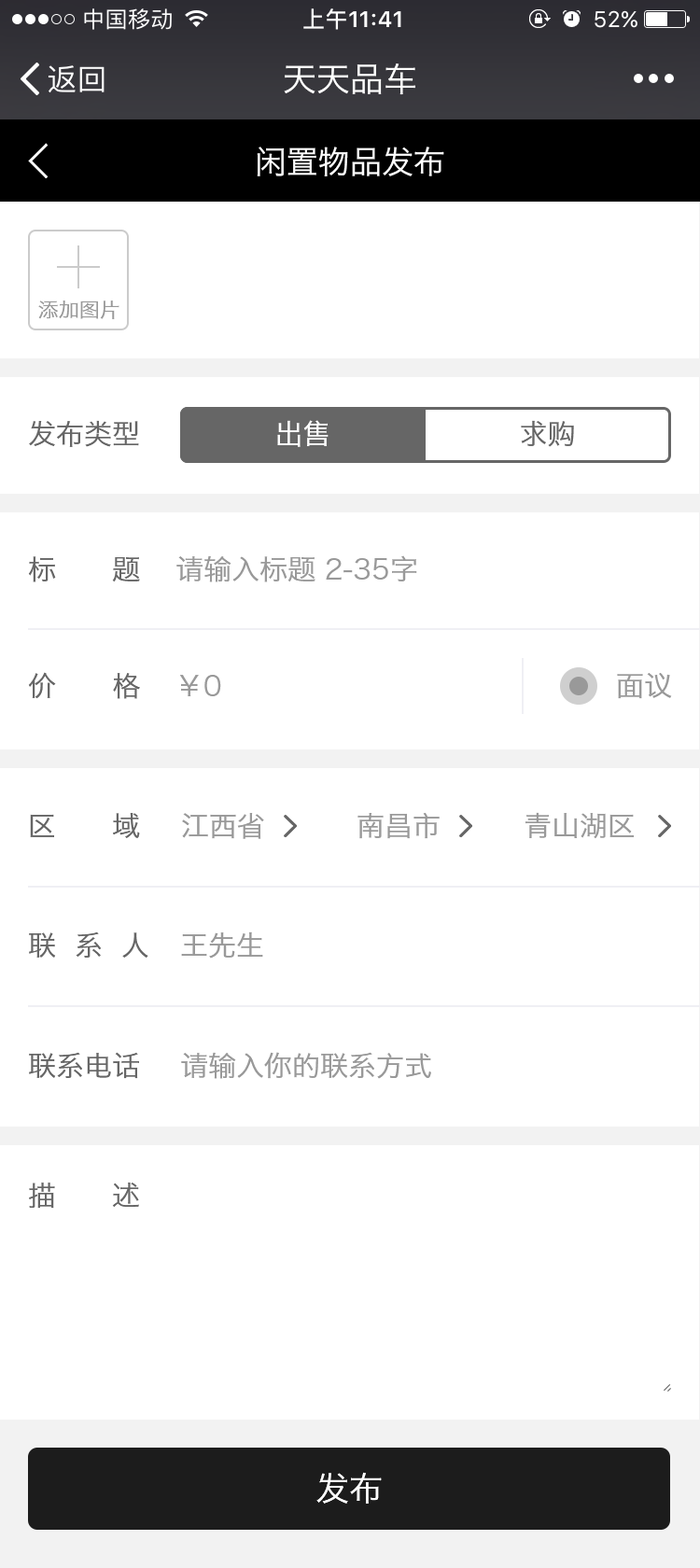
<style>
.page{position:relative;width:700px;height:1568px;background:#ffffff}
.page>*{position:absolute;margin:0}
.t1{font:33.6px "HiraginoSansGB-W3";color:#ffffff}
.t2{font:31.7px "HiraginoSansGB-W3";color:#ffffff}
.t3{font:20.5px "HiraginoSansGB-W3";color:#999999}
.t4{font:28px "HiraginoSansGB-W3";color:#666666;text-transform:uppercase}
.t5{font:28px "HiraginoSansGB-W3";color:#ffffff;text-transform:uppercase}
.t6{font:28px "HiraginoSansGB-W3";color:#999999;text-transform:uppercase}
.t7{font:33.6px "HiraginoSansGB-W3";color:#ffffff;text-transform:uppercase}
</style>
<div class="page">
<p class="t1" style="left:284px;top:63px;width:131px;height:32px">天天品车</p>
<p class="t2" style="left:257px;top:147px;width:187px;height:29px">闲置物品发布</p>
<p class="t3" style="left:38px;top:301px;width:81px;height:18px">添加图片</p>
<p class="t4" style="left:29px;top:420px;width:110px;height:27px">发布类型</p>
<p class="t5" style="left:277px;top:420px;width:52px;height:27px">出售</p>
<p class="t4" style="left:521px;top:420px;width:53px;height:27px">求购</p>
<p class="t4" style="left:28px;top:556px;width:112px;height:26px">标      题</p>
<p class="t6" style="left:176px;top:555px;width:241px;height:27px">请输入标题 2-35字</p>
<p class="t4" style="left:28px;top:672px;width:112px;height:27px">价      格</p>
<p class="t6" style="left:179px;top:675px;width:42px;height:21px">￥0</p>
<p class="t6" style="left:617px;top:673px;width:55px;height:26px">面议</p>
<p class="t4" style="left:30px;top:813px;width:110px;height:25px">区      域</p>
<p class="t6" style="left:182px;top:813px;width:82px;height:26px">江西省</p>
<p class="t6" style="left:357px;top:812px;width:83px;height:27px">南昌市</p>
<p class="t6" style="left:525px;top:812px;width:109px;height:27px">青山湖区</p>
<p class="t4" style="left:29px;top:931px;width:119px;height:27px">联  系  人</p>
<p class="t6" style="left:181px;top:931px;width:82px;height:28px">王先生</p>
<p class="t4" style="left:29px;top:1052px;width:110px;height:27px">联系电话</p>
<p class="t6" style="left:181px;top:1052px;width:250px;height:27px">请输入你的联系方式</p>
<p class="t4" style="left:29px;top:1183px;width:110px;height:26px">描      述</p>
<p class="t7" style="left:316px;top:1472px;width:66px;height:32px">发布</p>
</div>
